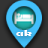
<style>
.page{position:relative;width:48px;height:48px}
.page>*{position:absolute;margin:0}
.t1{font:9.4px "BerlinSansFBDemi-Bold";color:#ffffff;scale:1.43 1}
</style>
<div class="page">
<p class="t1" style="left:16px;top:30px;width:16px;height:6px">ak</p>
</div>
